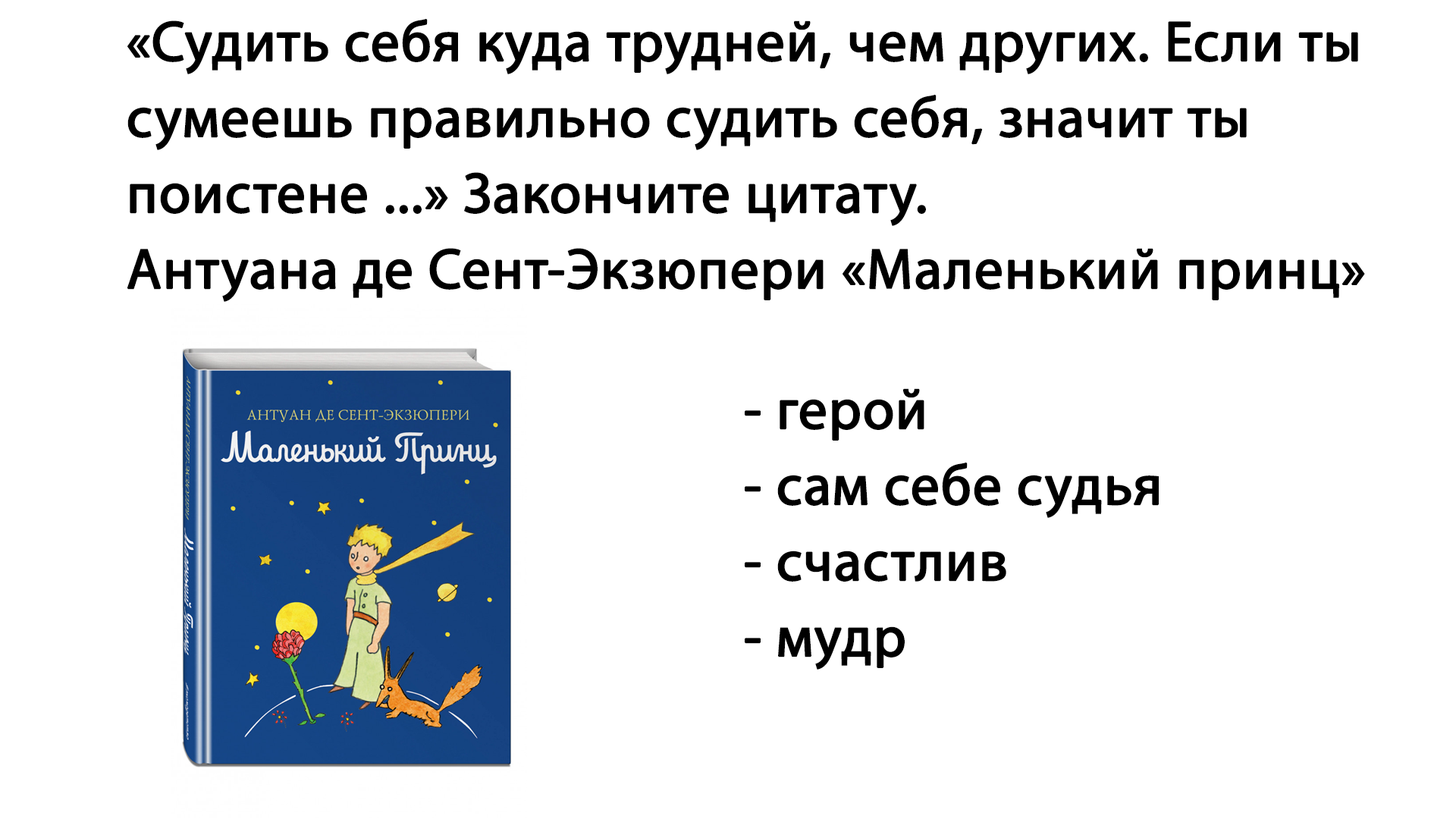
<style>
.page{position:relative;width:1456px;height:819px;background:#ffffff}
.page>*{position:absolute;margin:0}
.t1{font:56.9px/75.8px "MyriadPro-Regular";color:#000000;font-weight:bold}
</style>
<div class="page">
<p class="t1" style="left:127px;top:18px;width:1238px;height:284px">«Судить себя куда трудней, чем других. Если ты <br>сумеешь правильно судить себя, значит ты <br>поистене ...» Закончите цитату. <br>Антуана де Сент-Экзюпери «Маленький принц»</p>
<p class="t1" style="left:745px;top:388px;width:414px;height:282px">- герой<br>- сам себе судья<br>- счастлив<br>- мудр</p>
</div>
